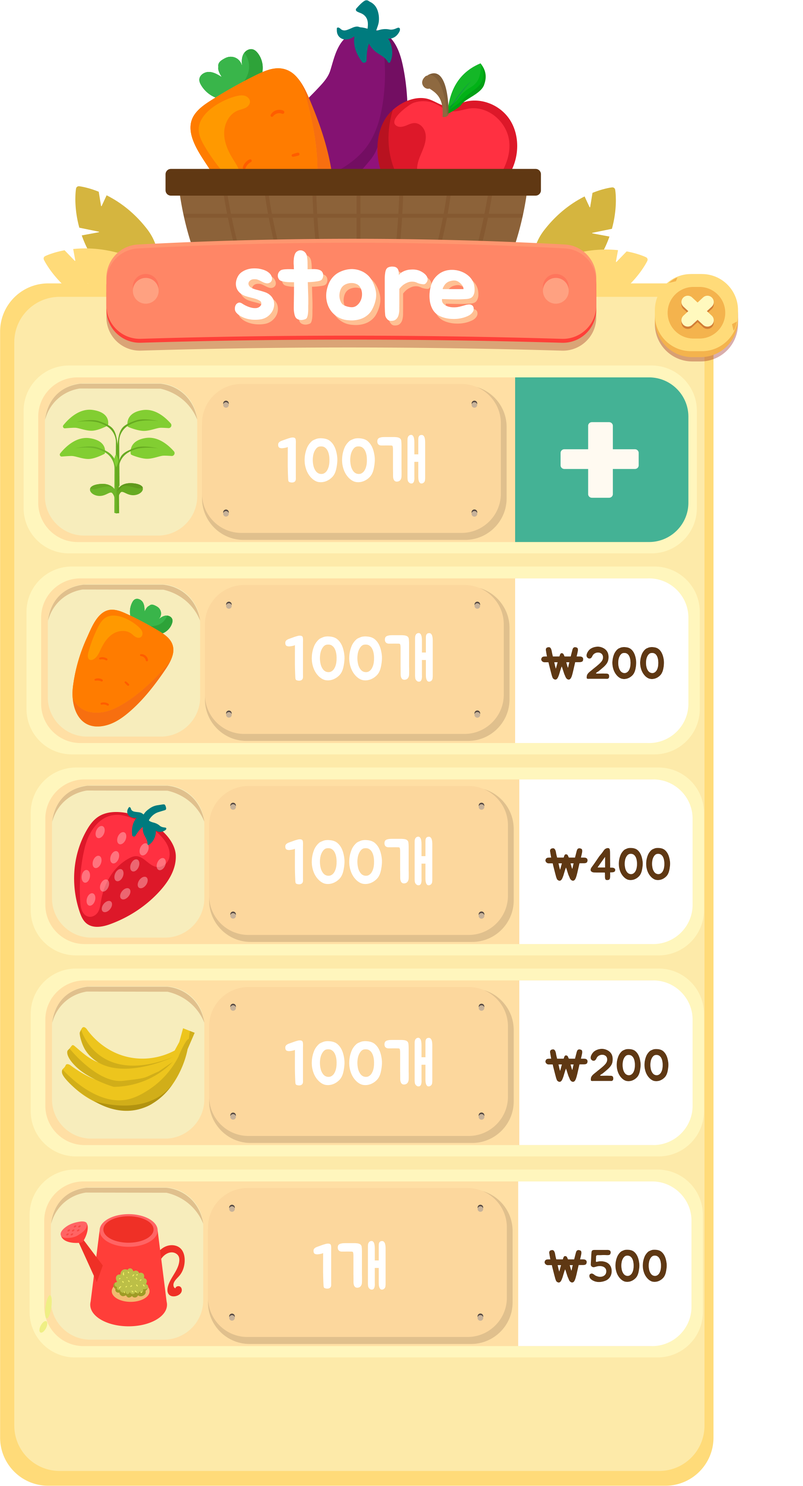
<style>
.page{position:relative;width:803px;height:1486px;background:#ffffff}
.page>*{position:absolute;margin:0}
.t1{font:105.2px "BMJUA";color:#ffffff}
.t2{font:105.2px "BMJUA"}
.t3{font:61.3px "BMJUA";color:#ffffff}
.t4{font:44.9px "BMJUAOTF";color:#603813}
.t5{font:44.9px "BMJUA";color:#603813}
</style>
<div class="page">
<p class="t1" style="left:235px;top:250px;width:239px;height:71px">store</p>
<p class="t2" style="left:239px;top:255px;width:239px;height:71px">store</p>
<p class="t3" style="left:278px;top:435px;width:147px;height:49px">100개</p>
<p class="t3" style="left:285px;top:633px;width:148px;height:49px">100개</p>
<p class="t4" style="left:541px;top:646px;width:123px;height:34px">\200</p>
<p class="t3" style="left:285px;top:836px;width:147px;height:49px">100개</p>
<p class="t5" style="left:545px;top:848px;width:125px;height:33px">\400</p>
<p class="t3" style="left:285px;top:1037px;width:147px;height:50px">100개</p>
<p class="t5" style="left:545px;top:1048px;width:123px;height:34px">\200</p>
<p class="t3" style="left:313px;top:1240px;width:73px;height:50px">1개</p>
<p class="t5" style="left:544px;top:1249px;width:123px;height:34px">\500</p>
</div>
